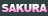
<style>
.page{position:relative;width:48px;height:16px;background:#314242}
.page>*{position:absolute;margin:0}
.t1{font:11px "Arial-Black";scale:0.87 1}
</style>
<div class="page">
<p class="t1" style="left:1px;top:4px;width:46px;height:8px">SAKURA</p>
</div>
